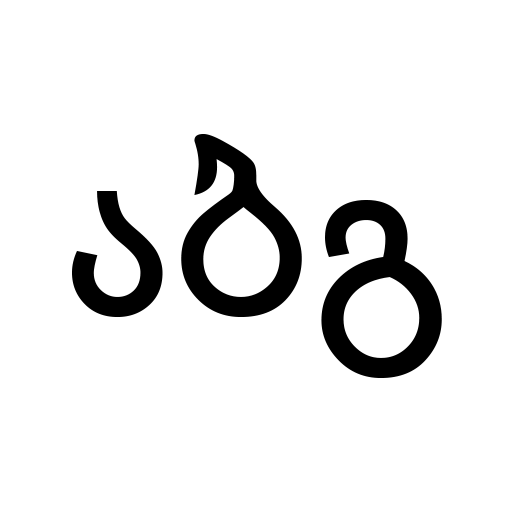
<style>
.page{position:relative;width:512px;height:512px;background:#ffffff}
.page>*{position:absolute;margin:0}
.t1{font:250px "ArialUnicodeMS";color:#000000}
</style>
<div class="page">
<p class="t1" style="left:72px;top:134px;width:370px;height:244px">აბგ</p>
</div>
